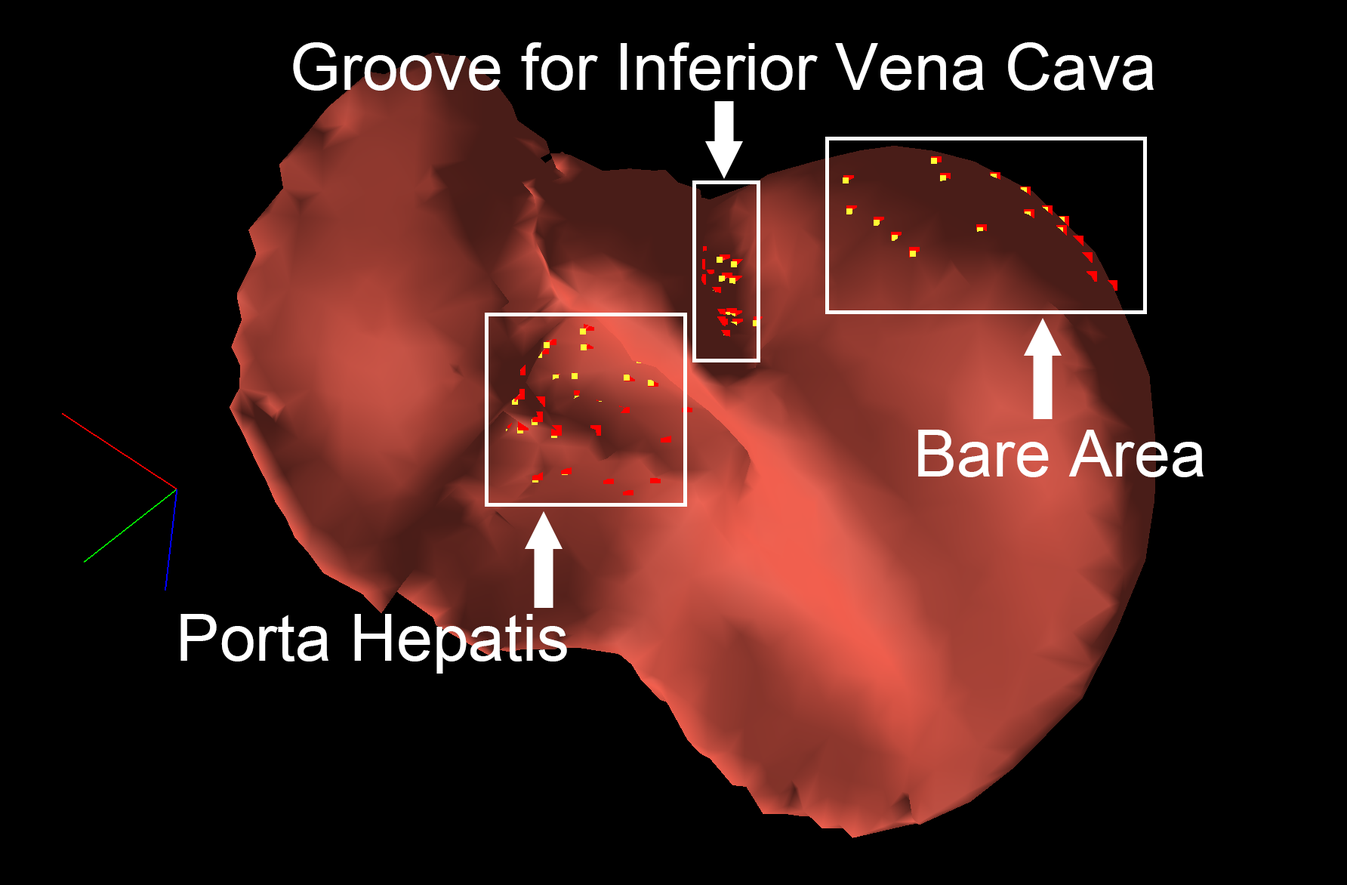
<style>
.page{position:relative;width:1347px;height:885px;background:#000000}
.page>*{position:absolute;margin:0}
.t1{font:65px "ArialMT";color:#ffffff}
</style>
<div class="page">
<p class="t1" style="left:293px;top:42px;width:861px;height:49px">Groove for Inferior Vena Cava</p>
<p class="t1" style="left:918px;top:430px;width:286px;height:47px">Bare Area</p>
<p class="t1" style="left:180px;top:614px;width:387px;height:60px">Porta Hepatis</p>
</div>
